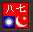
<style>
.page{position:relative;width:33px;height:32px;background:#f20000}
.page>*{position:absolute;margin:0}
.t1{font:10.4px "SimSun";color:#ffffff}
</style>
<div class="page">
<p class="t1" style="left:6px;top:4px;width:20px;height:9px">八七</p>
</div>
